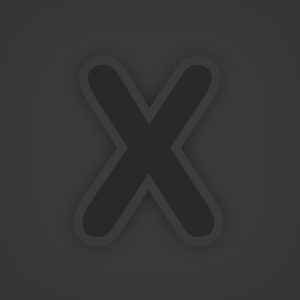
<style>
.page{position:relative;width:300px;height:300px;background:#383838}
.page>*{position:absolute;margin:0}
.t1{font:232px "ArialRoundedMTBold";color:#292929}
</style>
<div class="page">
<p class="t1" style="left:82px;top:65px;width:133px;height:172px">X</p>
</div>
